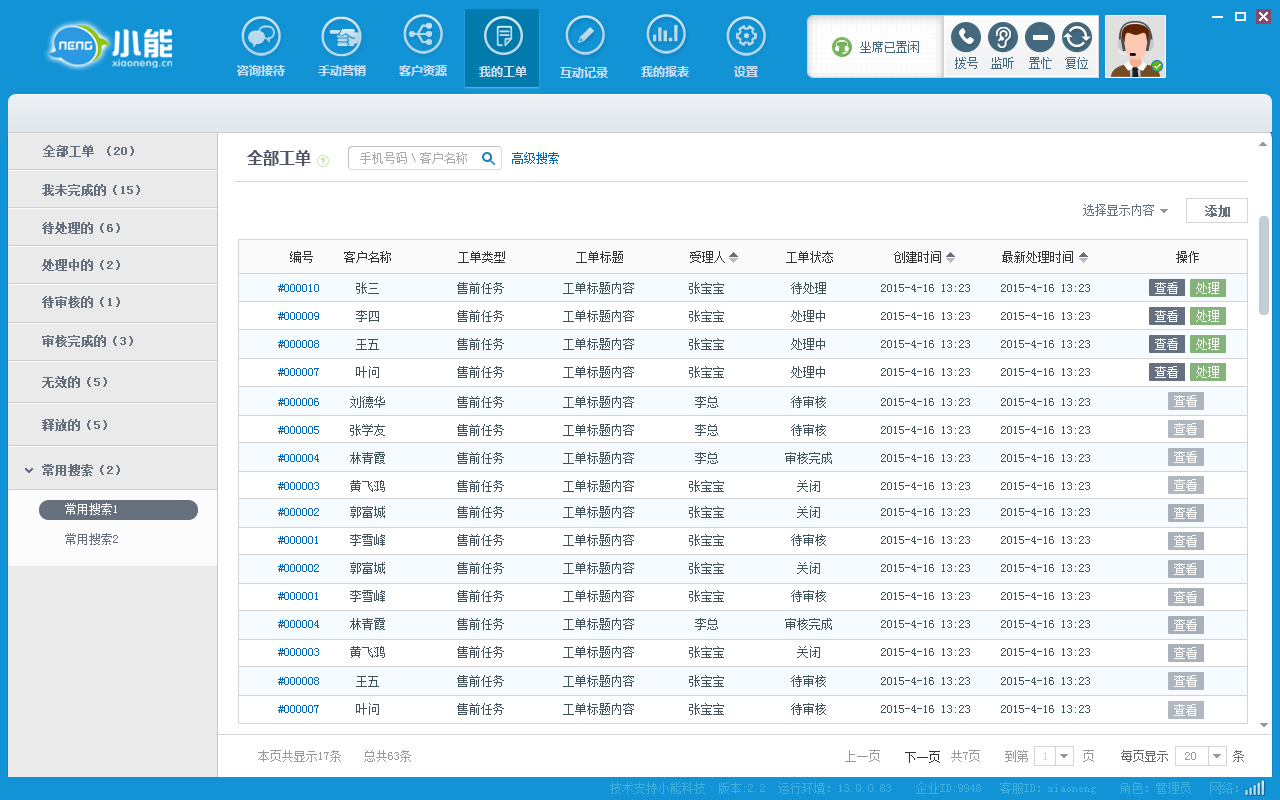
<style>
.page{position:relative;width:1280px;height:800px;background:#ffffff}
.page>*{position:absolute;margin:0}
.t1{font:12px "NSimSun";color:#44687d;text-transform:uppercase}
.t2{font:12px "MicrosoftYaHei-Bold";color:#c8dff6}
.t3{font:12.1px "NSimSun";color:#44687d;text-transform:uppercase}
.t4{font:12px "SimSun";color:#67717d;font-weight:bold}
.t5{font:16px "MicrosoftYaHei-Bold";color:#515567}
.t6{font:12px "SimSun";color:#aaaaaa}
.t7{font:12px "SimSun";color:#0068b7}
.t8{font:12px "SimSun";color:#657181}
.t9{font:12px "SimSun";color:#333333}
.t10{font:12px/14px "SimSun";color:#41515a}
.t11{font:12px/14px "SimSun";color:#0068b7}
.t12{font:12px "SimSun";color:#ffffff;text-transform:uppercase}
.t13{font:12px "SimSun";color:#999999;text-transform:uppercase}
.t14{font:12px "SimSun";color:#666666;text-transform:uppercase}
.t15{font:12px "SimSun";color:#d4d4d4;text-transform:uppercase}
.t16{font:12px "SimSun";color:#3eb0dd}
</style>
<div class="page">
<p class="t1" style="left:860px;top:41px;width:59px;height:12px">坐席已置闲</p>
<p class="t2" style="left:237px;top:65px;width:48px;height:11px">咨询接待</p>
<p class="t2" style="left:318px;top:65px;width:48px;height:11px">手动营销</p>
<p class="t2" style="left:399px;top:65px;width:48px;height:11px">客户资源</p>
<p class="t3" style="left:955px;top:57px;width:23px;height:12px">拨号</p>
<p class="t3" style="left:991px;top:57px;width:23px;height:12px">监听</p>
<p class="t3" style="left:1029px;top:57px;width:23px;height:12px">置忙</p>
<p class="t3" style="left:1065px;top:57px;width:23px;height:12px">复位</p>
<p class="t2" style="left:479px;top:66px;width:48px;height:11px">我的工单</p>
<p class="t2" style="left:560px;top:67px;width:48px;height:11px">互动记录</p>
<p class="t2" style="left:641px;top:66px;width:48px;height:11px">我的报表</p>
<p class="t2" style="left:734px;top:66px;width:24px;height:11px">设置</p>
<p class="t4" style="left:43px;top:145px;width:91px;height:12px">全部工单（20）</p>
<p class="t5" style="left:247px;top:150px;width:64px;height:16px">全部工单</p>
<p class="t6" style="left:360px;top:152px;width:107px;height:12px">手机号码\客户名称</p>
<p class="t7" style="left:512px;top:152px;width:47px;height:12px">高级搜索</p>
<p class="t4" style="left:42px;top:184px;width:98px;height:12px">我未完成的（15）</p>
<p class="t8" style="left:1083px;top:204px;width:71px;height:12px">选择显示内容</p>
<p class="t4" style="left:1205px;top:205px;width:25px;height:12px">添加</p>
<p class="t4" style="left:42px;top:222px;width:78px;height:12px">待处理的（6）</p>
<p class="t9" style="left:290px;top:251px;width:909px;height:12px">编号     客户名称           工单类型            工单标题           受理人          工单状态          创建时间          最新处理时间                 操作</p>
<p class="t4" style="left:42px;top:259px;width:78px;height:12px">处理中的（2）</p>
<p class="t10" style="left:278px;top:282px;width:812px;height:40px"><span class="t11">#000010</span>      张三             售前任务          工单标题内容         张宝宝           待处理         2015-4-16 13:23     2015-4-16 13:23       <br><br><span class="t11">#000009</span>      李四             售前任务          工单标题内容         张宝宝           处理中         2015-4-16 13:23     2015-4-16 13:23</p>
<p class="t12" style="left:1155px;top:282px;width:23px;height:12px">查看</p>
<p class="t12" style="left:1196px;top:282px;width:23px;height:12px">处理</p>
<p class="t4" style="left:42px;top:296px;width:78px;height:12px">待审核的（1）</p>
<p class="t12" style="left:1155px;top:310px;width:23px;height:12px">查看</p>
<p class="t12" style="left:1196px;top:310px;width:23px;height:12px">处理</p>
<p class="t4" style="left:42px;top:335px;width:91px;height:12px">审核完成的（3）</p>
<p class="t10" style="left:278px;top:338px;width:812px;height:40px"><span class="t11">#000008</span>      王五             售前任务          工单标题内容         张宝宝           处理中         2015-4-16 13:23     2015-4-16 13:23       <br><br><span class="t11">#000007</span>      叶问             售前任务          工单标题内容         张宝宝           处理中         2015-4-16 13:23     2015-4-16 13:23</p>
<p class="t12" style="left:1155px;top:338px;width:23px;height:12px">查看</p>
<p class="t12" style="left:1196px;top:338px;width:23px;height:12px">处理</p>
<p class="t12" style="left:1155px;top:366px;width:23px;height:12px">查看</p>
<p class="t12" style="left:1196px;top:366px;width:23px;height:12px">处理</p>
<p class="t4" style="left:42px;top:376px;width:65px;height:12px">无效的（5）</p>
<p class="t10" style="left:278px;top:396px;width:812px;height:40px"><span class="t11">#000006</span>     刘德华            售前任务          工单标题内容          李总            待审核         2015-4-16 13:23     2015-4-16 13:23       <br><br><span class="t11">#000005</span>     张学友            售前任务          工单标题内容          李总            待审核         2015-4-16 13:23     2015-4-16 13:23</p>
<p class="t12" style="left:1174px;top:395px;width:23px;height:12px">查看</p>
<p class="t4" style="left:42px;top:419px;width:65px;height:12px">释放的（5）</p>
<p class="t12" style="left:1174px;top:423px;width:23px;height:12px">查看</p>
<p class="t10" style="left:278px;top:452px;width:812px;height:40px"><span class="t11">#000004</span>     林青霞            售前任务          工单标题内容          李总           审核完成        2015-4-16 13:23     2015-4-16 13:23       <br><br><span class="t11">#000003</span>     黄飞鸿            售前任务          工单标题内容         张宝宝            关闭          2015-4-16 13:23     2015-4-16 13:23</p>
<p class="t12" style="left:1174px;top:451px;width:23px;height:12px">查看</p>
<p class="t4" style="left:42px;top:464px;width:78px;height:12px">常用搜索（2）</p>
<p class="t12" style="left:1174px;top:479px;width:23px;height:12px">查看</p>
<p class="t10" style="left:278px;top:506px;width:812px;height:40px"><span class="t11">#000002</span>     郭富城            售前任务          工单标题内容         张宝宝            关闭          2015-4-16 13:23     2015-4-16 13:23        <br><br><span class="t11">#000001</span>     李雪峰            售前任务          工单标题内容         张宝宝           待审核         2015-4-16 13:23     2015-4-16 13:23</p>
<p class="t12" style="left:1174px;top:507px;width:23px;height:12px">查看</p>
<p class="t12" style="left:1174px;top:535px;width:23px;height:12px">查看</p>
<p class="t10" style="left:278px;top:562px;width:812px;height:40px"><span class="t11">#000002</span>     郭富城            售前任务          工单标题内容         张宝宝            关闭          2015-4-16 13:23     2015-4-16 13:23        <br><br><span class="t11">#000001</span>     李雪峰            售前任务          工单标题内容         张宝宝           待审核         2015-4-16 13:23     2015-4-16 13:23</p>
<p class="t12" style="left:1174px;top:563px;width:23px;height:12px">查看</p>
<p class="t12" style="left:1174px;top:591px;width:23px;height:12px">查看</p>
<p class="t10" style="left:278px;top:618px;width:812px;height:40px"><span class="t11">#000004</span>     林青霞            售前任务          工单标题内容          李总           审核完成        2015-4-16 13:23     2015-4-16 13:23       <br><br><span class="t11">#000003</span>     黄飞鸿            售前任务          工单标题内容         张宝宝            关闭          2015-4-16 13:23     2015-4-16 13:23</p>
<p class="t12" style="left:1174px;top:619px;width:23px;height:12px">查看</p>
<p class="t12" style="left:1174px;top:647px;width:23px;height:12px">查看</p>
<p class="t10" style="left:278px;top:675px;width:812px;height:40px"><span class="t11">#000008</span>      王五             售前任务          工单标题内容         张宝宝           待审核         2015-4-16 13:23     2015-4-16 13:23       <br><br><span class="t11">#000007</span>      叶问             售前任务          工单标题内容         张宝宝           待审核         2015-4-16 13:23     2015-4-16 13:23</p>
<p class="t12" style="left:1174px;top:675px;width:23px;height:12px">查看</p>
<p class="t12" style="left:1174px;top:704px;width:23px;height:12px">查看</p>
<p class="t13" style="left:258px;top:750px;width:83px;height:12px">本页共显示17条</p>
<p class="t13" style="left:364px;top:750px;width:47px;height:12px">总共63条</p>
<p class="t13" style="left:845px;top:750px;width:35px;height:12px">上一页</p>
<p class="t13" style="left:951px;top:750px;width:29px;height:12px">共7页</p>
<p class="t13" style="left:1005px;top:750px;width:89px;height:12px">到第         页</p>
<p class="t14" style="left:1121px;top:750px;width:47px;height:12px">每页显示</p>
<p class="t13" style="left:1185px;top:750px;width:59px;height:12px">20      <span class="t14">条</span></p>
<p class="t9" style="left:905px;top:751px;width:35px;height:12px">下一页</p>
<p class="t15" style="left:1044px;top:752px;width:3px;height:8px">1</p>
<p class="t16" style="left:610px;top:782px;width:628px;height:12px">技术支持小能科技  版本:2.2  运行环境：13.0.0.83    企业ID:9948   客服ID：xiaoneng    角色：管理员   网络：</p>
</div>
